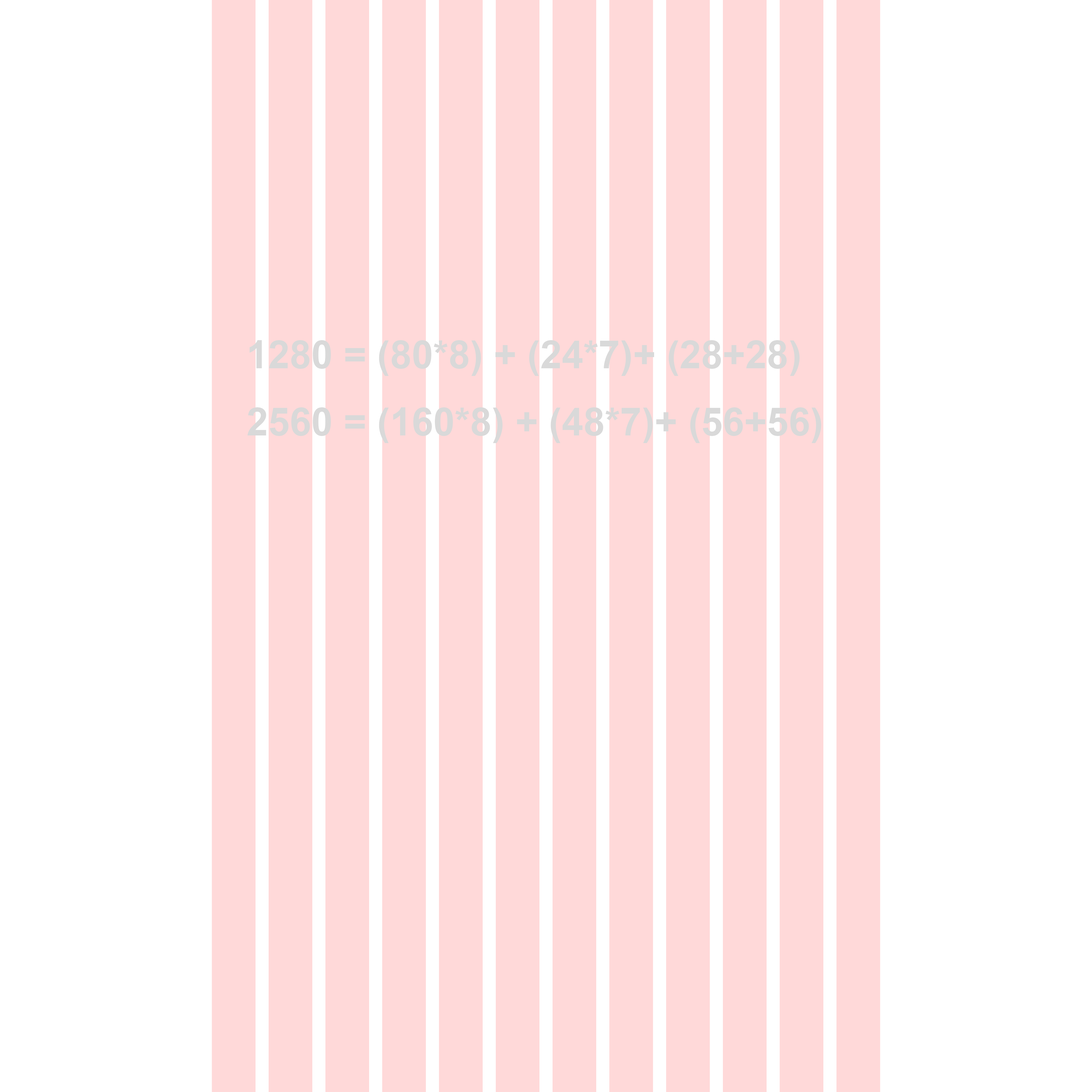
<style>
.page{position:relative;width:1092px;height:1092px;background:#ffffff}
.page>*{position:absolute;margin:0}
.t1{font:38.9px "Arial-BoldMT";color:#d9d9d9}
</style>
<div class="page">
<p class="t1" style="left:250px;top:340px;width:550px;height:36px">1280 = (80*8) + (24*7)+ (28+28)</p>
<p class="t1" style="left:247px;top:407px;width:574px;height:36px">2560 = (160*8) + (48*7)+ (56+56)</p>
</div>
